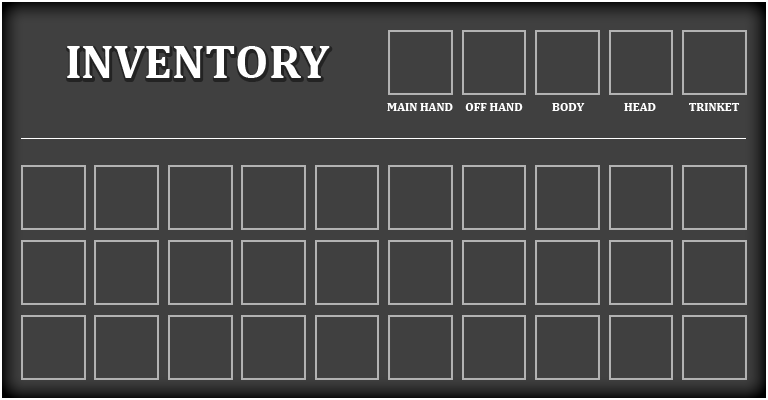
<style>
.page{position:relative;width:768px;height:400px;background:#404040}
.page>*{position:absolute;margin:0}
.t1{font:48px "Cambria-Bold";color:#ffffff}
.t2{font:12px "Cambria-Bold";color:#ffffff}
</style>
<div class="page">
<p class="t1" style="left:67px;top:46px;width:263px;height:32px">INVENTORY</p>
<p class="t2" style="left:387px;top:103px;width:66px;height:8px">MAIN HAND</p>
<p class="t2" style="left:465px;top:103px;width:58px;height:8px">OFF HAND</p>
<p class="t2" style="left:552px;top:103px;width:33px;height:8px">BODY</p>
<p class="t2" style="left:624px;top:103px;width:32px;height:8px">HEAD</p>
<p class="t2" style="left:689px;top:103px;width:51px;height:8px">TRINKET</p>
</div>
